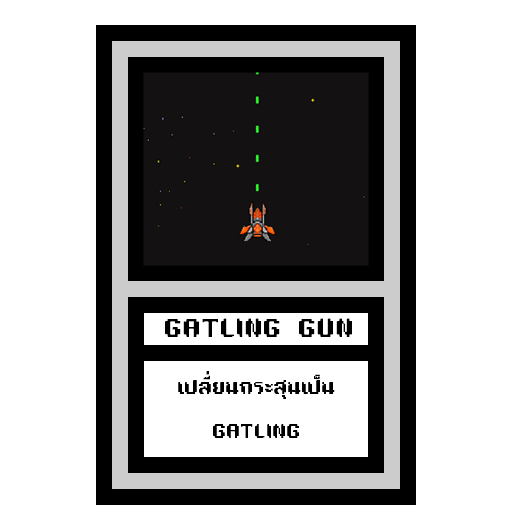
<style>
.page{position:relative;width:512px;height:512px;background:#ffffff}
.page>*{position:absolute;margin:0}
.t1{font:24px "TA16BIT-Regular";color:#000000}
.t2{font:18px "TA16BIT-Regular";color:#000000}
</style>
<div class="page">
<p class="t1" style="left:165px;top:318px;width:187px;height:19px">GATLING GUN</p>
<p class="t2" style="left:178px;top:371px;width:157px;height:67px;text-align:center">เปลี่ยนกระสุนเป็น<br><br>GATLING</p>
</div>
